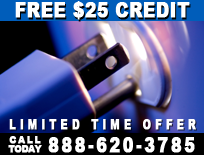
<style>
.page{position:relative;width:204px;height:155px}
.page>*{position:absolute;margin:0}
.t1{font:20.6px "Arial-Black";letter-spacing:0.02em;color:#ffffff;font-weight:bold;scale:0.82 1}
.t2{font:13px "Arial-Black";letter-spacing:0.34em;color:#ffffff;font-weight:bold;scale:0.8 1}
.t3{font:9px/9px "Arial-Black";letter-spacing:-0.08em;color:#ffffff;font-weight:bold}
.t4{font:9px/9px "Arial-Black";letter-spacing:0.16em;color:#ffffff;font-weight:bold}
.t5{font:20px "Arial-Black";letter-spacing:0.14em;color:#ffffff;font-weight:bold;scale:0.8 1}
</style>
<div class="page">
<p class="t1" style="left:15px;top:1px;width:175px;height:19px">FREE $25 CREDIT</p>
<p class="t2" style="left:9px;top:119px;width:187px;height:11px">LIMITED TIME OFFER</p>
<p class="t3" style="left:8px;top:136px;width:34px;height:17px;text-align:center"><span class="t4">CALL<br></span>TODAY</p>
<p class="t5" style="left:48px;top:137px;width:147px;height:16px">888-620-3785</p>
</div>
